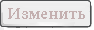
<style>
.page{position:relative;width:94px;height:30px;background:#eeeeee}
.page>*{position:absolute;margin:0}
.t1{font:17px "MinionPro-Bold";color:#c4afaf;scale:1.05 1}
</style>
<div class="page">
<p class="t1" style="left:8px;top:8px;width:77px;height:11px">Изменить</p>
</div>
